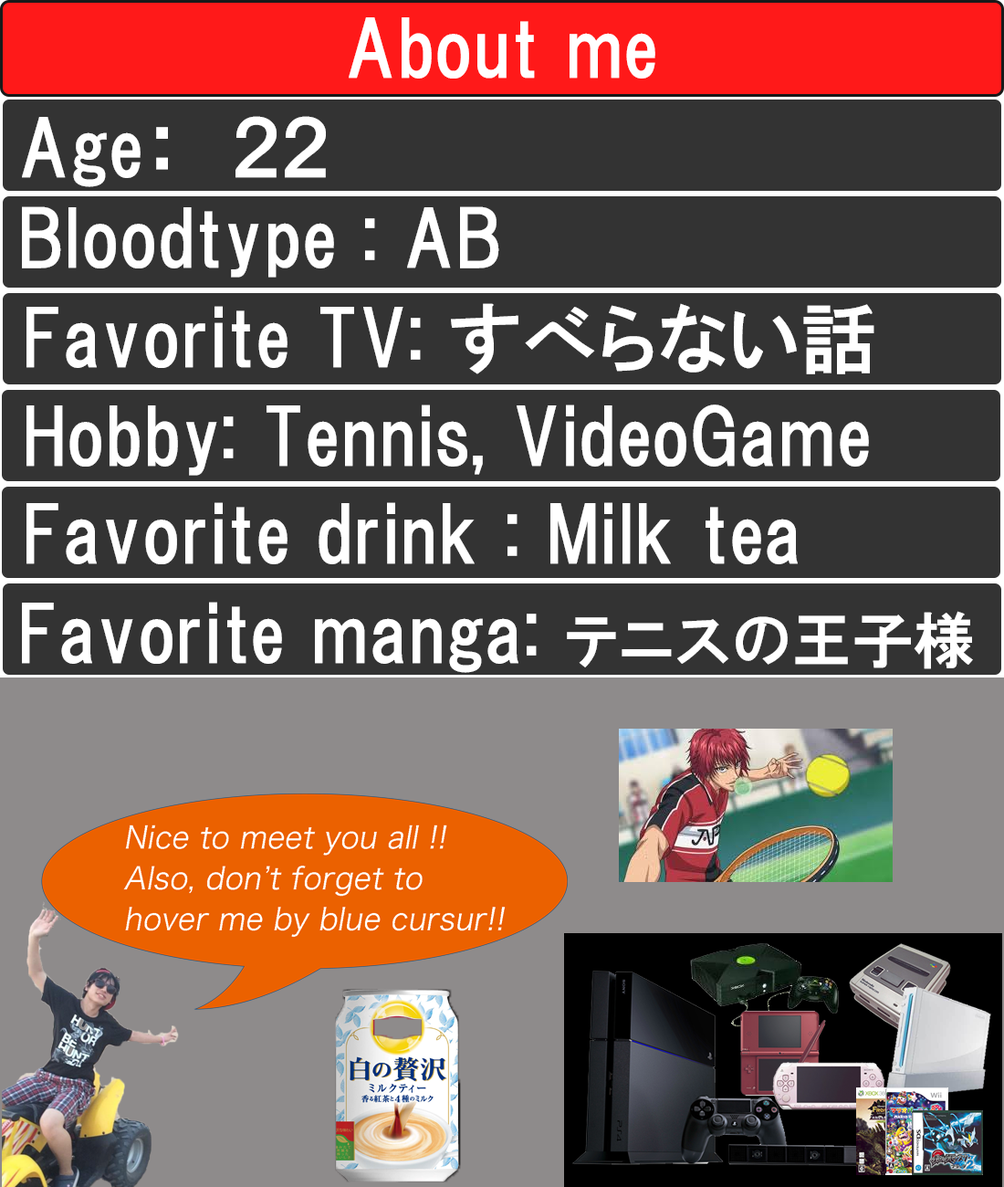
<style>
.page{position:relative;width:1004px;height:1187px;background:#333333}
.page>*{position:absolute;margin:0}
.t1{font:76.1px "HGPGothicE";color:#ffffff}
.t2{font:60.9px "HGPGothicE";color:#ffffff}
</style>
<div class="page">
<p class="t1" style="left:349px;top:17px;width:307px;height:62px">About me</p>
<p class="t1" style="left:22px;top:116px;width:304px;height:71px">Age：　２２</p>
<p class="t1" style="left:22px;top:206px;width:478px;height:72px">Bloodtype : AB</p>
<p class="t1" style="left:26px;top:303px;width:849px;height:71px">Favorite TV: すべらない話</p>
<p class="t1" style="left:26px;top:405px;width:843px;height:71px">Hobby: Tennis, VideoGame</p>
<p class="t1" style="left:26px;top:502px;width:772px;height:62px">Favorite drink : Milk tea</p>
<p class="t1" style="left:22px;top:602px;width:951px;height:71px">Favorite manga: <span class="t2">テニスの王子様</span></p>
</div>
